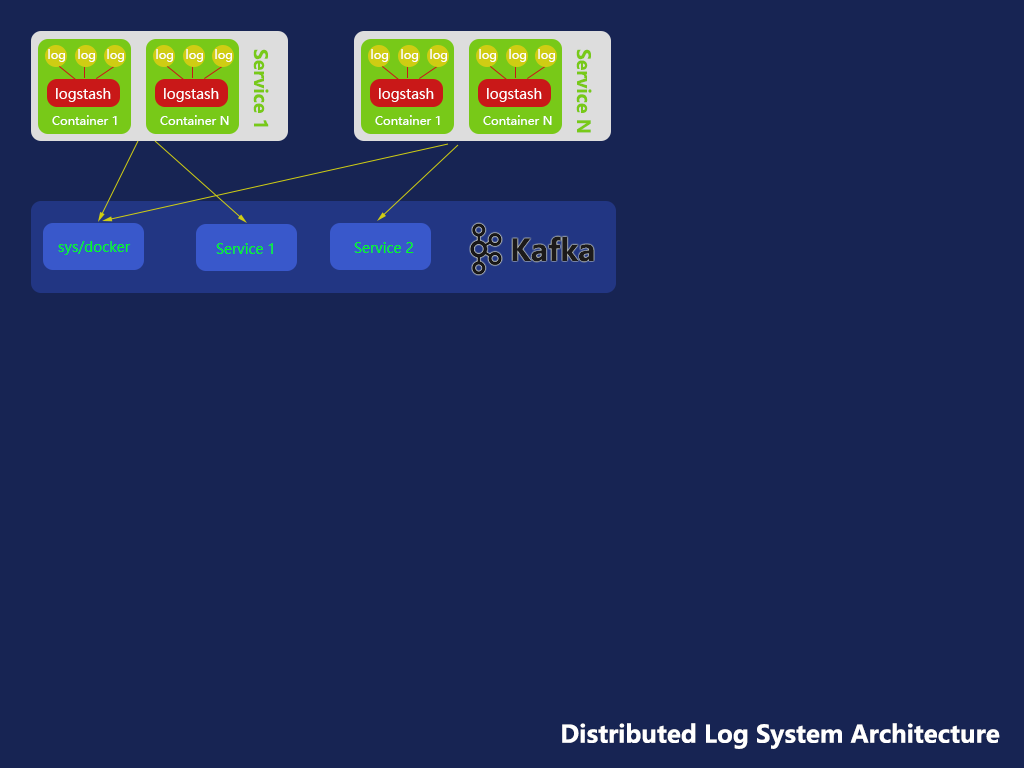
<style>
.page{position:relative;width:1024px;height:768px;background:#172453}
.page>*{position:absolute;margin:0}
.t1{font:12px "MicrosoftYaHei";color:#ffffff}
.t2{font:18px "MicrosoftYaHei-Bold";color:#78c918}
.t3{font:14px "MicrosoftYaHei";color:#ffffff}
.t4{font:14px "MicrosoftYaHei";color:#00ff18}
.t5{font:30px "MicrosoftYaHei-Bold";color:#1c1a1a}
.t6{font:24px "MicrosoftYaHei-Bold";color:#ffffff}
</style>
<div class="page">
<p class="t1" style="left:48px;top:49px;width:17px;height:13px">log</p>
<p class="t1" style="left:78px;top:49px;width:17px;height:13px">log</p>
<p class="t1" style="left:107px;top:49px;width:17px;height:13px">log</p>
<p class="t1" style="left:156px;top:49px;width:17px;height:13px">log</p>
<p class="t1" style="left:186px;top:49px;width:17px;height:13px">log</p>
<p class="t1" style="left:215px;top:49px;width:17px;height:13px">log</p>
<p class="t2" style="left:253px;top:49px;width:16px;height:78px">Service 1</p>
<p class="t1" style="left:371px;top:49px;width:17px;height:13px">log</p>
<p class="t1" style="left:401px;top:49px;width:17px;height:13px">log</p>
<p class="t1" style="left:430px;top:49px;width:17px;height:13px">log</p>
<p class="t1" style="left:479px;top:49px;width:17px;height:13px">log</p>
<p class="t1" style="left:509px;top:49px;width:17px;height:13px">log</p>
<p class="t1" style="left:538px;top:49px;width:17px;height:13px">log</p>
<p class="t2" style="left:576px;top:49px;width:16px;height:84px">Service N</p>
<p class="t3" style="left:56px;top:88px;width:55px;height:14px">logstash</p>
<p class="t3" style="left:164px;top:88px;width:55px;height:14px">logstash</p>
<p class="t3" style="left:379px;top:88px;width:55px;height:14px">logstash</p>
<p class="t3" style="left:487px;top:88px;width:55px;height:14px">logstash</p>
<p class="t1" style="left:52px;top:115px;width:65px;height:10px">Container 1</p>
<p class="t1" style="left:160px;top:115px;width:69px;height:10px">Container N</p>
<p class="t1" style="left:375px;top:115px;width:65px;height:10px">Container 1</p>
<p class="t1" style="left:483px;top:115px;width:69px;height:10px">Container N</p>
<p class="t4" style="left:58px;top:241px;width:73px;height:14px">sys/docker</p>
<p class="t4" style="left:216px;top:243px;width:57px;height:11px">Service 1</p>
<p class="t4" style="left:354px;top:242px;width:60px;height:11px">Service 2</p>
<p class="t5" style="left:512px;top:236px;width:82px;height:26px">Kafka</p>
<p class="t6" style="left:562px;top:723px;width:438px;height:26px">Distributed Log System Architecture</p>
</div>
